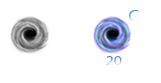
<style>
.page{position:relative;width:161px;height:83px;background:#ffffff}
.page>*{position:absolute;margin:0}
.t1{font:15.7px "MyriadPro-Regular";scale:1.22 1}
.t2{font:13.2px "MyriadPro-Regular";scale:1.17 1}
</style>
<div class="page">
<p class="t1" style="left:129px;top:10px;width:10px;height:11px">C</p>
<p class="t2" style="left:106px;top:56px;width:16px;height:9px">20</p>
</div>
